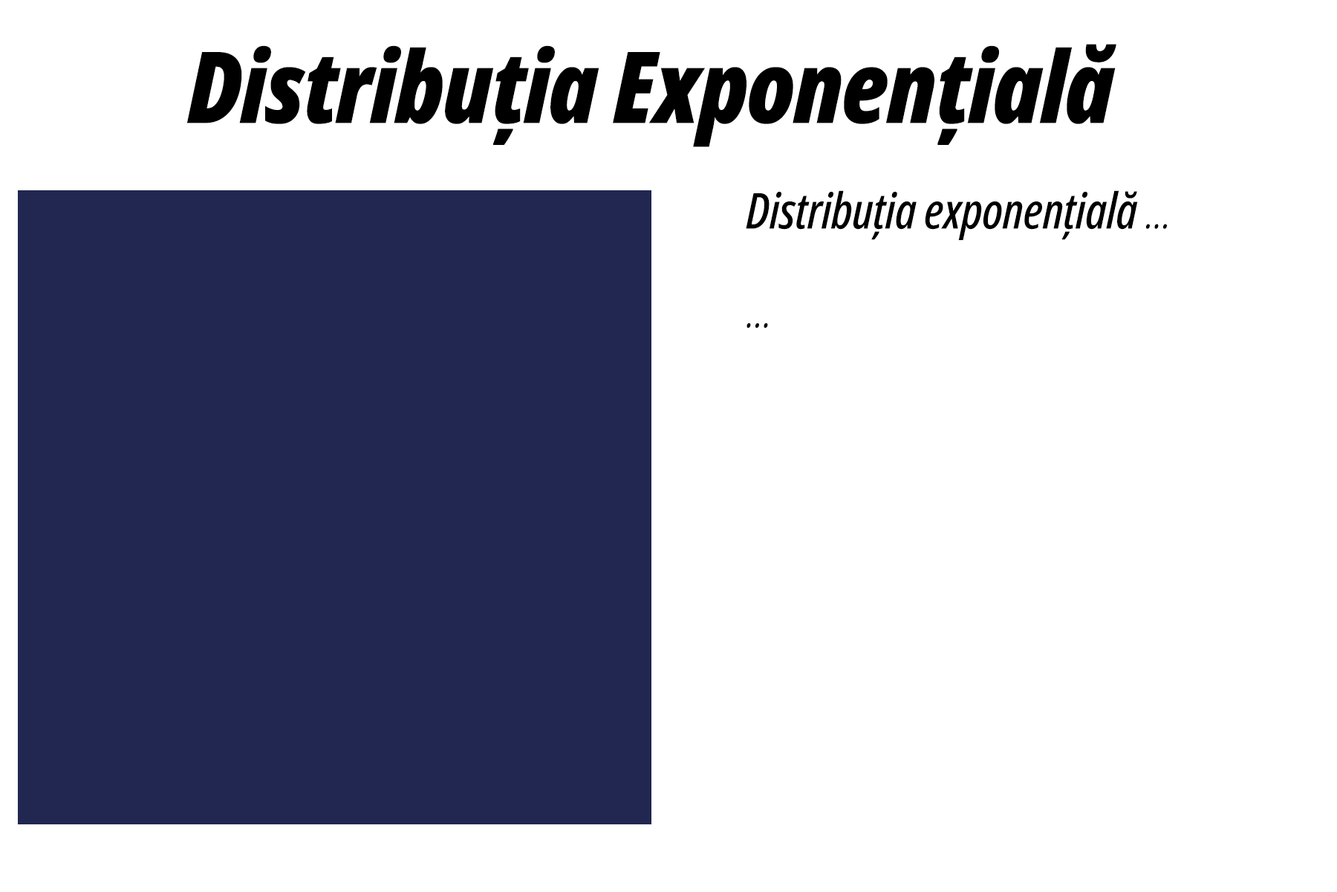
<style>
.page{position:relative;width:1337px;height:892px;background:#ffffff}
.page>*{position:absolute;margin:0}
.t1{font:99.1px "NotoSans-ExtraCondensedBlackItalic";letter-spacing:-0.005em;color:#000000}
.t2{font:49.5px/49.5px "NotoSans-ExtraCondensedMediumItalic";letter-spacing:-0.005em;color:#000000}
.t3{font:49.5px/49.5px "NotoSans-ExtraCondensedLightItalic";letter-spacing:-0.005em;color:#000000}
</style>
<div class="page">
<p class="t1" style="left:187px;top:44px;width:930px;height:103px">Distribuția Exponențială</p>
<p class="t2" style="left:746px;top:190px;width:421px;height:138px"><span class="t3"> </span>Distribuția exponențială <span class="t3">... <br><br> ...</span></p>
</div>
